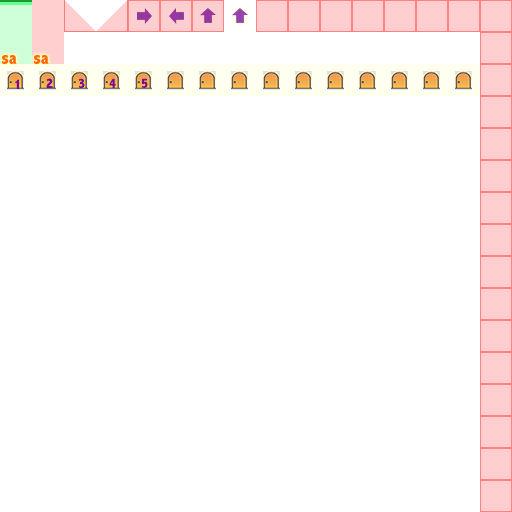
<style>
.page{position:relative;width:512px;height:512px;background:#ffffff}
.page>*{position:absolute;margin:0}
.t1{font:14px "AbadiMT-CondensedExtraBold";color:#780a8f}
</style>
<div class="page">
<p class="t1" style="left:46px;top:78px;width:7px;height:10px">2</p>
<p class="t1" style="left:46px;top:78px;width:7px;height:10px">2</p>
<p class="t1" style="left:79px;top:78px;width:6px;height:10px">3</p>
<p class="t1" style="left:109px;top:78px;width:7px;height:10px">4</p>
<p class="t1" style="left:142px;top:78px;width:6px;height:10px">5</p>
<p class="t1" style="left:15px;top:79px;width:4px;height:10px">1</p>
</div>
